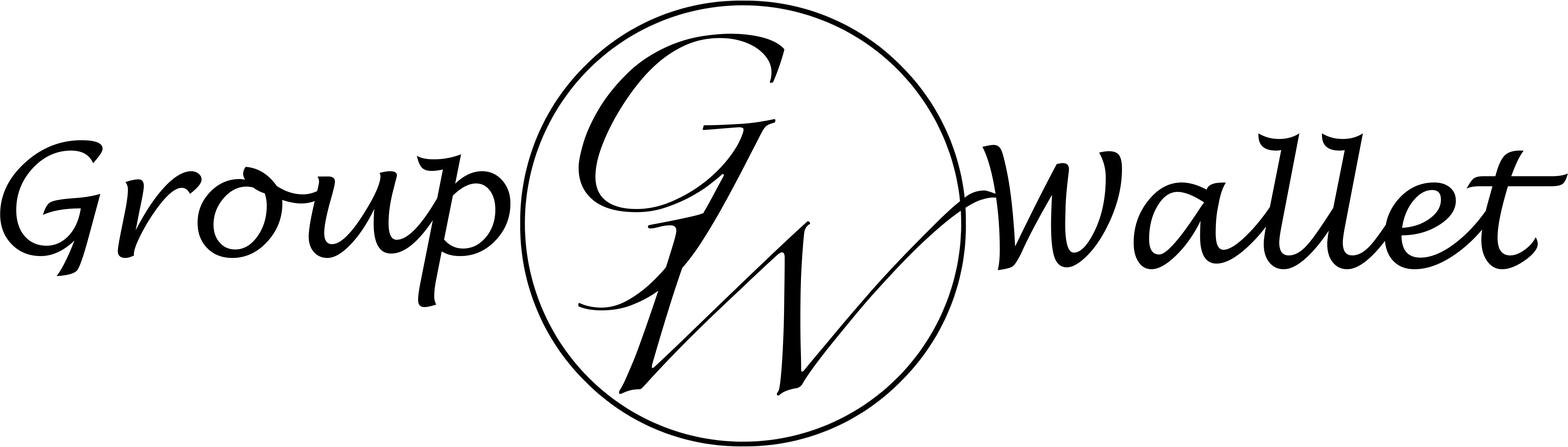
<style>
.page{position:relative;width:1568px;height:447px;background:#ffffff}
.page>*{position:absolute;margin:0}
.t1{font:156.5px "Zapfino";color:#000000}
.t2{font:156.5px "LucidaHandwriting-Italic";color:#000000}
</style>
<div class="page">
<p class="t1" style="left:578px;top:33px;width:207px;height:277px">G</p>
<p class="t2" style="left:982px;top:133px;width:586px;height:137px">Wallet<br>let</p>
<p class="t2" style="left:0px;top:140px;width:510px;height:167px">Group</p>
<p class="t1" style="left:619px;top:190px;width:380px;height:206px">W</p>
</div>
